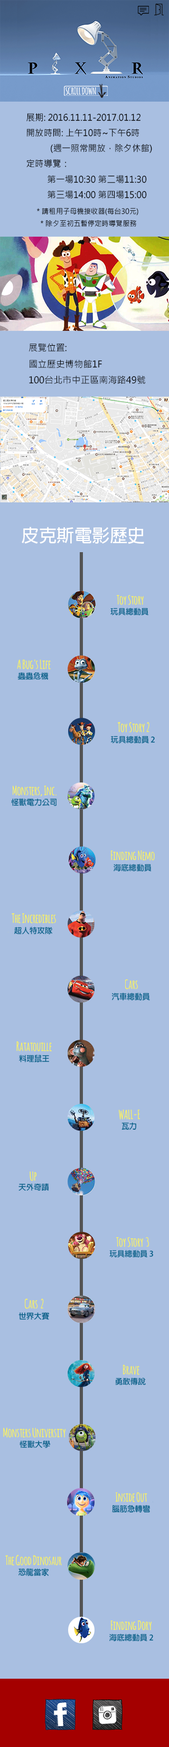
<style>
.page{position:relative;width:169px;height:1747px;background:#a9bfe1}
.page>*{position:absolute;margin:0}
.t1{font:8.8px "MicrosoftJhengHeiRegular";color:#000000}
.t2{font:7.1px "MicrosoftJhengHeiRegular";color:#000000}
.t3{font:9.2px "MicrosoftJhengHeiRegular";color:#000000}
.t4{font:17.7px "AdobeFanHeitiStd-Bold";color:#fefefe}
</style>
<div class="page">
<p class="t1" style="left:26px;top:113px;width:126px;height:85px">展期: 2016.11.11-2017.01.12<br>開放時間: 上午10時~下午6時<br>           (週一照常開放，除夕休館)<br>定時導覽： <br>  第一場10:30 第二場11:30 <br>  第三場14:00 第四場15:00</p>
<p class="t2" style="left:37px;top:207px;width:102px;height:20px;text-align:center">＊請租用子母機接收器(每台30元) <br>＊除夕至初五暫停定時導覽服務</p>
<p class="t3" style="left:29px;top:343px;width:117px;height:41px">展覽位置:<br>國立歷史博物館1F<br>100台北市中正區南海路49號</p>
<p class="t4" style="left:22px;top:527px;width:122px;height:17px">皮克斯電影歷史</p>
</div>
